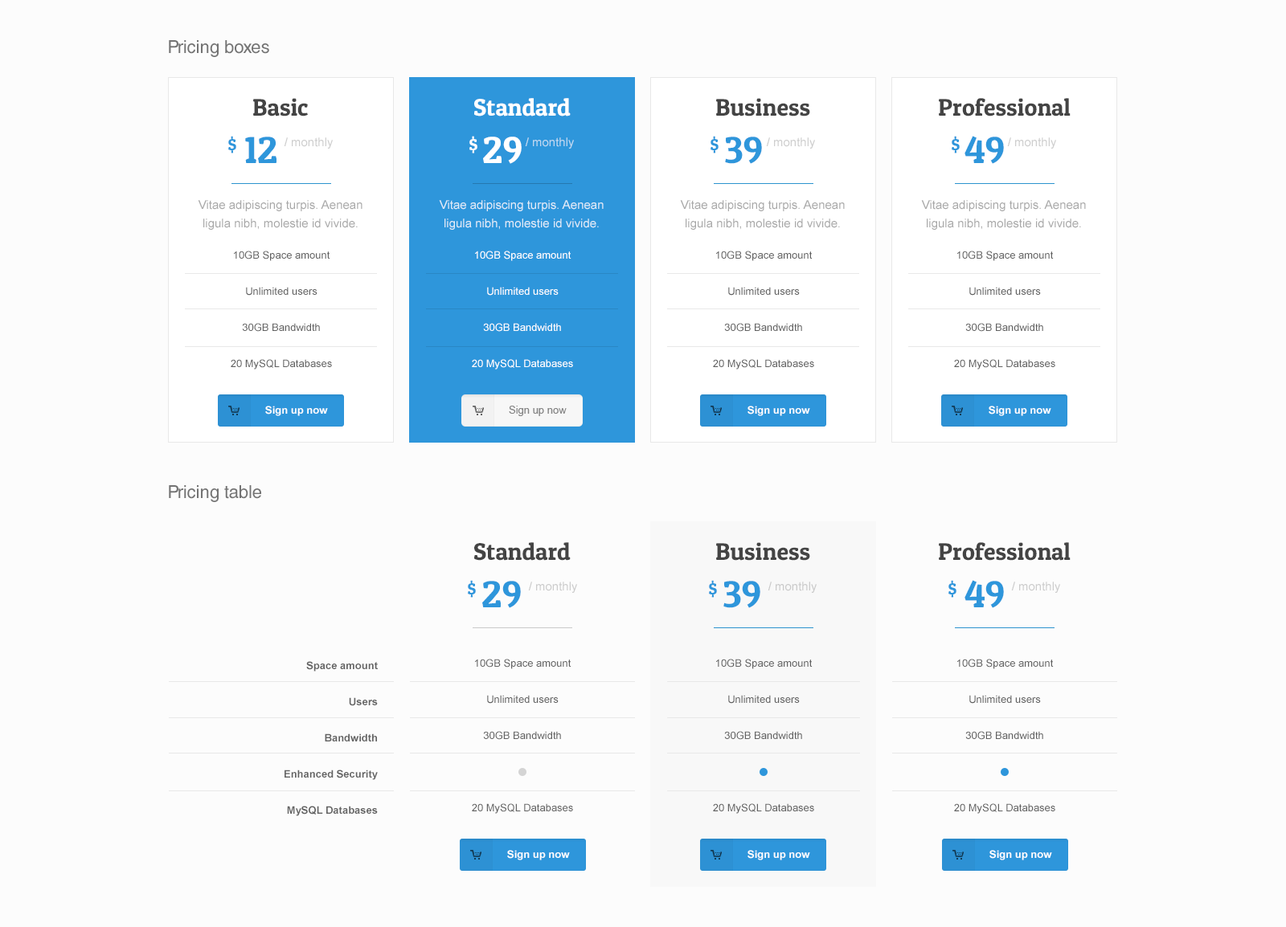
<style>
.page{position:relative;width:1286px;height:927px;background:#fcfcfc}
.page>*{position:absolute;margin:0}
.t1{font:17.7px "HelveticaCE-Regular";color:#737373}
.t2{font:24.1px "PatuaOne-Regular";color:#444444}
.t3{font:24.1px "PatuaOne-Regular";color:#ffffff}
.t4{font:16.1px "PatuaOne-Regular";color:#2e96db}
.t5{font:37.8px "PatuaOne-Regular";color:#2e96db}
.t6{font:12.1px "ArialMT";color:#cecece}
.t7{font:16.1px "PatuaOne-Regular";color:#ffffff}
.t8{font:37.8px "PatuaOne-Regular";color:#ffffff}
.t9{font:12.1px "ArialMT";color:#bed9f1}
.t10{font:12.1px/18.5px "ArialMT";color:#a8a8a8}
.t11{font:12.1px/18.5px "ArialMT";color:#e0ecf8}
.t12{font:10.4px/36.2px "ArialMT";color:#626262}
.t13{font:10.4px/36.2px "ArialMT";color:#ffffff}
.t14{font:10.4px "Arial-BoldMT";color:#ffffff}
.t15{font:10.4px "ArialMT";color:#747474}
.t16{font:12.1px "ArialMT";color:#cccccc}
.t17{font:12.1px "ArialMT";color:#cacaca}
.t18{font:10.5px/36.2px "Arial-BoldMT";color:#626262}
</style>
<div class="page">
<p class="t1" style="left:169px;top:40px;width:100px;height:17px">Pricing boxes</p>
<p class="t2" style="left:253px;top:98px;width:55px;height:19px">Basic</p>
<p class="t3" style="left:474px;top:98px;width:97px;height:19px">Standard</p>
<p class="t2" style="left:716px;top:98px;width:94px;height:19px">Business</p>
<p class="t2" style="left:939px;top:98px;width:131px;height:19px">Professional</p>
<p class="t4" style="left:228px;top:136px;width:8px;height:17px">$</p>
<p class="t5" style="left:245px;top:137px;width:31px;height:26px">12</p>
<p class="t6" style="left:284px;top:137px;width:49px;height:12px">/ monthly</p>
<p class="t7" style="left:469px;top:136px;width:8px;height:17px">$</p>
<p class="t8" style="left:483px;top:137px;width:39px;height:27px">29</p>
<p class="t9" style="left:525px;top:137px;width:49px;height:12px">/ monthly</p>
<p class="t4" style="left:710px;top:136px;width:8px;height:17px">$</p>
<p class="t5" style="left:725px;top:137px;width:37px;height:27px">39</p>
<p class="t6" style="left:766px;top:137px;width:49px;height:12px">/ monthly</p>
<p class="t4" style="left:951px;top:136px;width:9px;height:17px">$</p>
<p class="t5" style="left:964px;top:136px;width:40px;height:28px">49</p>
<p class="t6" style="left:1007px;top:137px;width:49px;height:12px">/ monthly</p>
<p class="t10" style="left:198px;top:200px;width:164px;height:30px;text-align:center">Vitae adipiscing turpis. Aenean ligula nibh, molestie id vivide.</p>
<p class="t11" style="left:439px;top:200px;width:165px;height:30px;text-align:center">Vitae adipiscing turpis. Aenean ligula nibh, molestie id vivide.</p>
<p class="t10" style="left:680px;top:200px;width:165px;height:30px;text-align:center">Vitae adipiscing turpis. Aenean ligula nibh, molestie id vivide.</p>
<p class="t10" style="left:921px;top:200px;width:165px;height:30px;text-align:center">Vitae adipiscing turpis. Aenean ligula nibh, molestie id vivide.</p>
<p class="t12" style="left:231px;top:251px;width:101px;height:119px;text-align:center">10GB Space amount<br>Unlimited users<br>30GB Bandwidth<br>20 MySQL Databases</p>
<p class="t13" style="left:472px;top:251px;width:101px;height:119px;text-align:center">10GB Space amount<br>Unlimited users<br>30GB Bandwidth<br>20 MySQL Databases</p>
<p class="t12" style="left:713px;top:251px;width:101px;height:119px;text-align:center">10GB Space amount<br>Unlimited users<br>30GB Bandwidth<br>20 MySQL Databases</p>
<p class="t12" style="left:954px;top:251px;width:101px;height:119px;text-align:center">10GB Space amount<br>Unlimited users<br>30GB Bandwidth<br>20 MySQL Databases</p>
<p class="t14" style="left:265px;top:406px;width:63px;height:10px">Sign up now</p>
<p class="t15" style="left:509px;top:406px;width:58px;height:10px;opacity:0.9">Sign up now</p>
<p class="t14" style="left:747px;top:406px;width:63px;height:10px">Sign up now</p>
<p class="t14" style="left:988px;top:406px;width:63px;height:10px">Sign up now</p>
<p class="t1" style="left:169px;top:485px;width:92px;height:17px">Pricing table</p>
<p class="t2" style="left:474px;top:542px;width:97px;height:19px">Standard</p>
<p class="t2" style="left:716px;top:542px;width:94px;height:19px">Business</p>
<p class="t2" style="left:939px;top:542px;width:131px;height:19px">Professional</p>
<p class="t4" style="left:468px;top:580px;width:8px;height:18px">$</p>
<p class="t5" style="left:482px;top:581px;width:39px;height:27px">29</p>
<p class="t16" style="left:528px;top:582px;width:49px;height:11px">/ monthly</p>
<p class="t4" style="left:709px;top:580px;width:8px;height:18px">$</p>
<p class="t5" style="left:723px;top:581px;width:37px;height:27px">39</p>
<p class="t17" style="left:767px;top:582px;width:49px;height:11px">/ monthly</p>
<p class="t4" style="left:948px;top:580px;width:8px;height:18px">$</p>
<p class="t5" style="left:964px;top:580px;width:40px;height:28px">49</p>
<p class="t16" style="left:1011px;top:582px;width:49px;height:11px">/ monthly</p>
<p class="t18" style="left:284px;top:661px;width:94px;height:155px;text-align:right">Space amount<br>Users<br>Bandwidth<br>Enhanced Security<br>MySQL Databases</p>
<p class="t12" style="left:472px;top:659px;width:101px;height:155px;text-align:center">10GB Space amount<br>Unlimited users<br>30GB Bandwidth<br><br>20 MySQL Databases</p>
<p class="t12" style="left:713px;top:659px;width:101px;height:155px;text-align:center">10GB Space amount<br>Unlimited users<br>30GB Bandwidth<br><br>20 MySQL Databases</p>
<p class="t12" style="left:954px;top:659px;width:101px;height:155px;text-align:center">10GB Space amount<br>Unlimited users<br>30GB Bandwidth<br><br>20 MySQL Databases</p>
<p class="t14" style="left:507px;top:850px;width:63px;height:11px">Sign up now</p>
<p class="t14" style="left:747px;top:850px;width:63px;height:11px">Sign up now</p>
<p class="t14" style="left:989px;top:850px;width:63px;height:11px">Sign up now</p>
</div>
